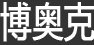
<style>
.page{position:relative;width:94px;height:45px;background:#333333}
.page>*{position:absolute;margin:0}
.t1{font:40.4px "MicrosoftYaHei";color:#ffffff;font-weight:bold;scale:0.76 1}
</style>
<div class="page">
<p class="t1" style="left:0px;top:2px;width:95px;height:40px">博奥克</p>
</div>
